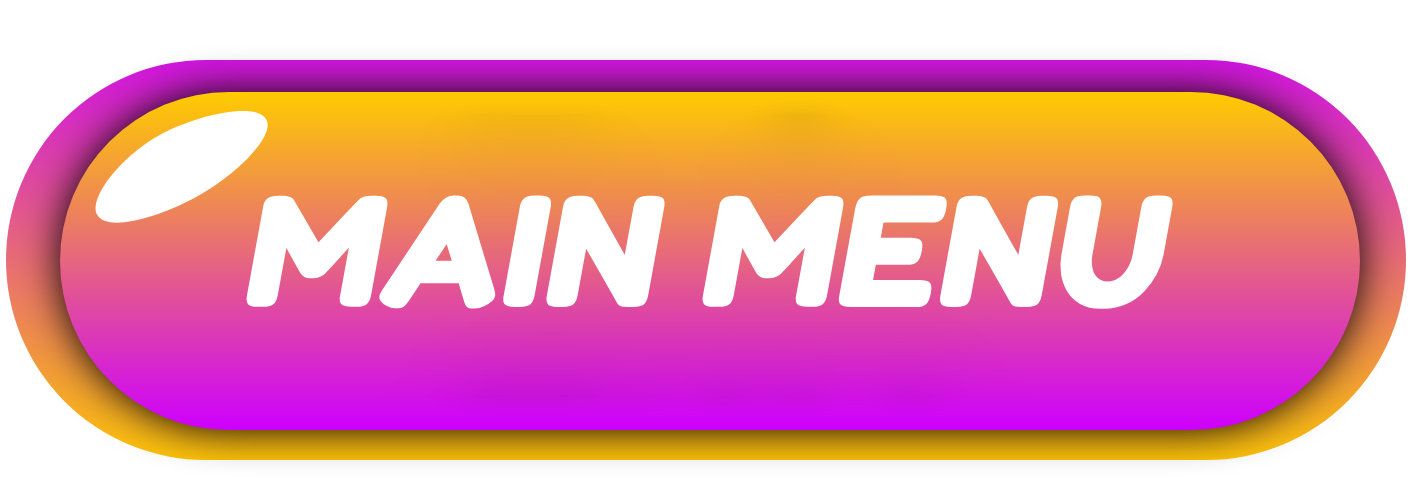
<style>
.page{position:relative;width:1420px;height:504px;background:#ffffff}
.page>*{position:absolute;margin:0}
.t1{font:152px "FredokaOne-Regular";color:#ffffff;font-weight:bold;font-style:italic}
</style>
<div class="page">
<p class="t1" style="left:246px;top:195px;width:927px;height:114px">MAIN MENU</p>
</div>
